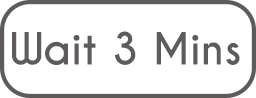
<style>
.page{position:relative;width:256px;height:98px;background:#ffffff}
.page>*{position:absolute;margin:0}
.t1{font:41.7px "CaviarDreams-Bold";color:#5f5b5b}
</style>
<div class="page">
<p class="t1" style="left:12px;top:31px;width:228px;height:34px">Wait 3 Mins</p>
</div>
